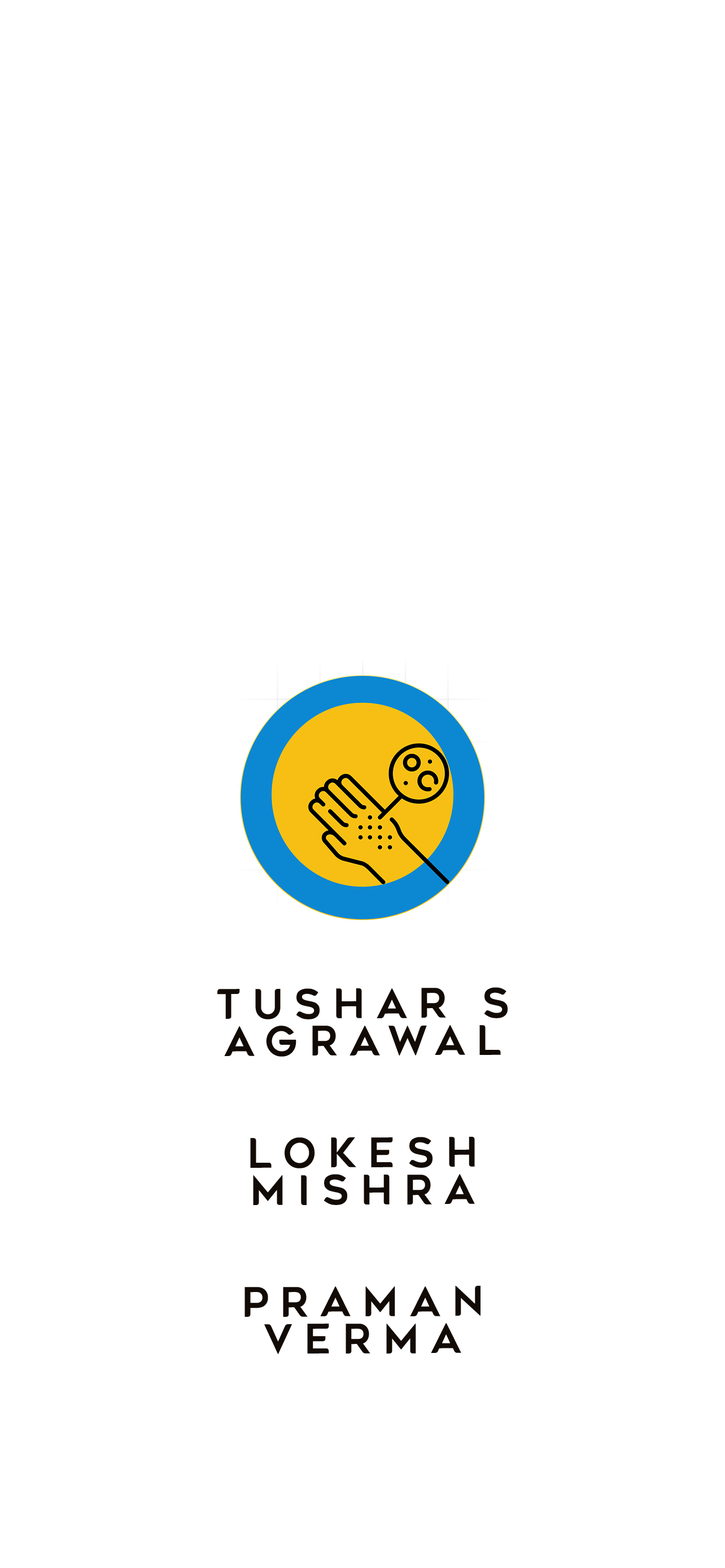
<style>
.page{position:relative;width:725px;height:1568px;background:#ffffff}
.page>*{position:absolute;margin:0}
.t1{font:40.6px/37.3px "Agenor-Regular";letter-spacing:0.3em;color:#120a04}
</style>
<div class="page">
<p class="t1" style="left:217px;top:987px;width:290px;height:367px;text-align:center">Tushar S Agrawal<br><br><br>Lokesh   Mishra <br><br><br>PRAMAN <br>VERMA</p>
</div>
